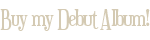
<style>
.page{position:relative;width:150px;height:40px;background:#ffffff}
.page>*{position:absolute;margin:0}
.t1{font:22.7px "Euphorigenic-Regular";letter-spacing:-0.05em;color:#d4cab3}
</style>
<div class="page">
<p class="t1" style="left:0px;top:9px;width:150px;height:22px">Buy my Debut Album!</p>
</div>
